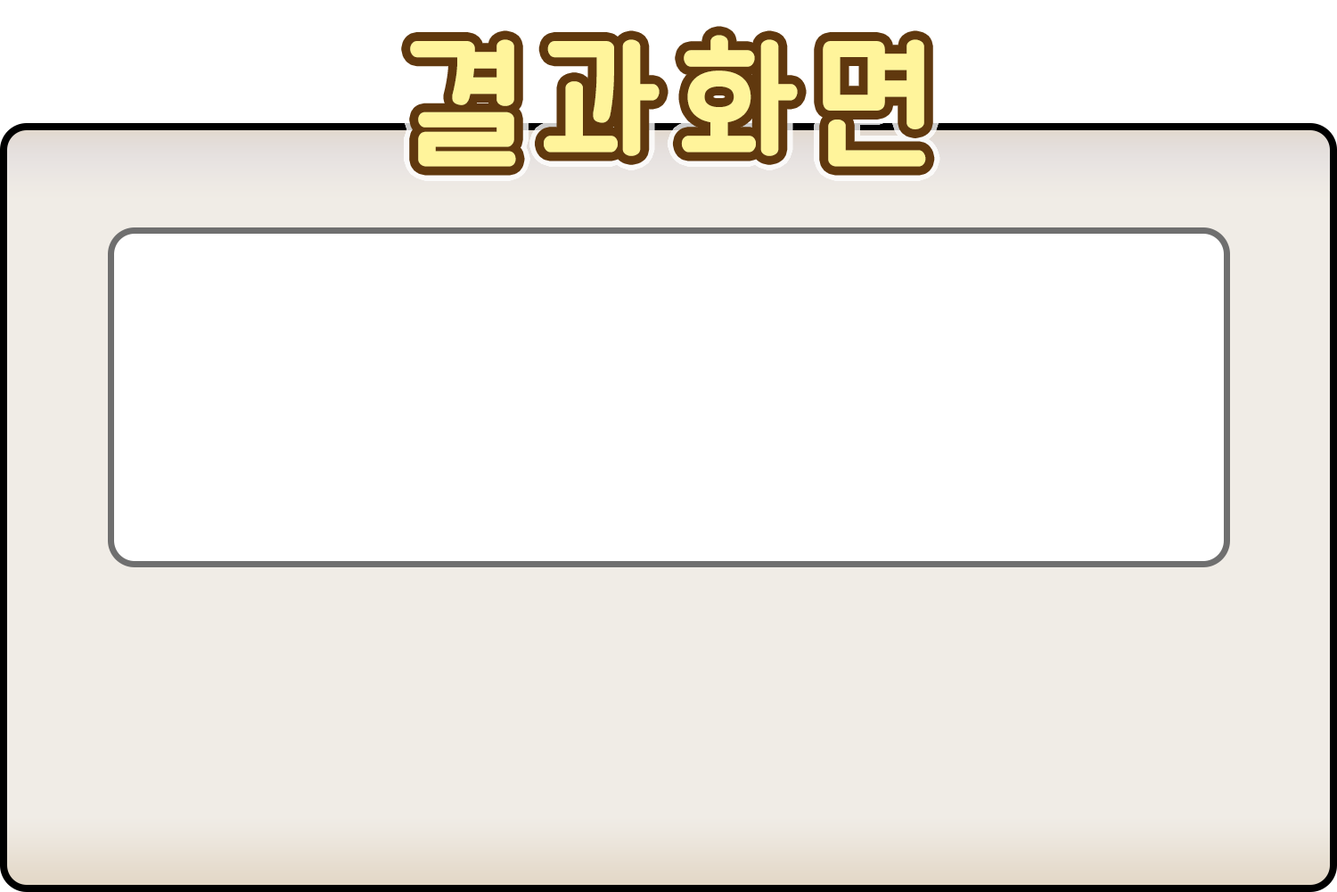
<style>
.page{position:relative;width:1337px;height:892px;background:#ffffff}
.page>*{position:absolute;margin:0}
.t1{font:133.7px "TTAppgulimR";letter-spacing:0.15em;color:#fff49b}
</style>
<div class="page">
<p class="t1" style="left:410px;top:35px;width:516px;height:132px">결과화면</p>
</div>
